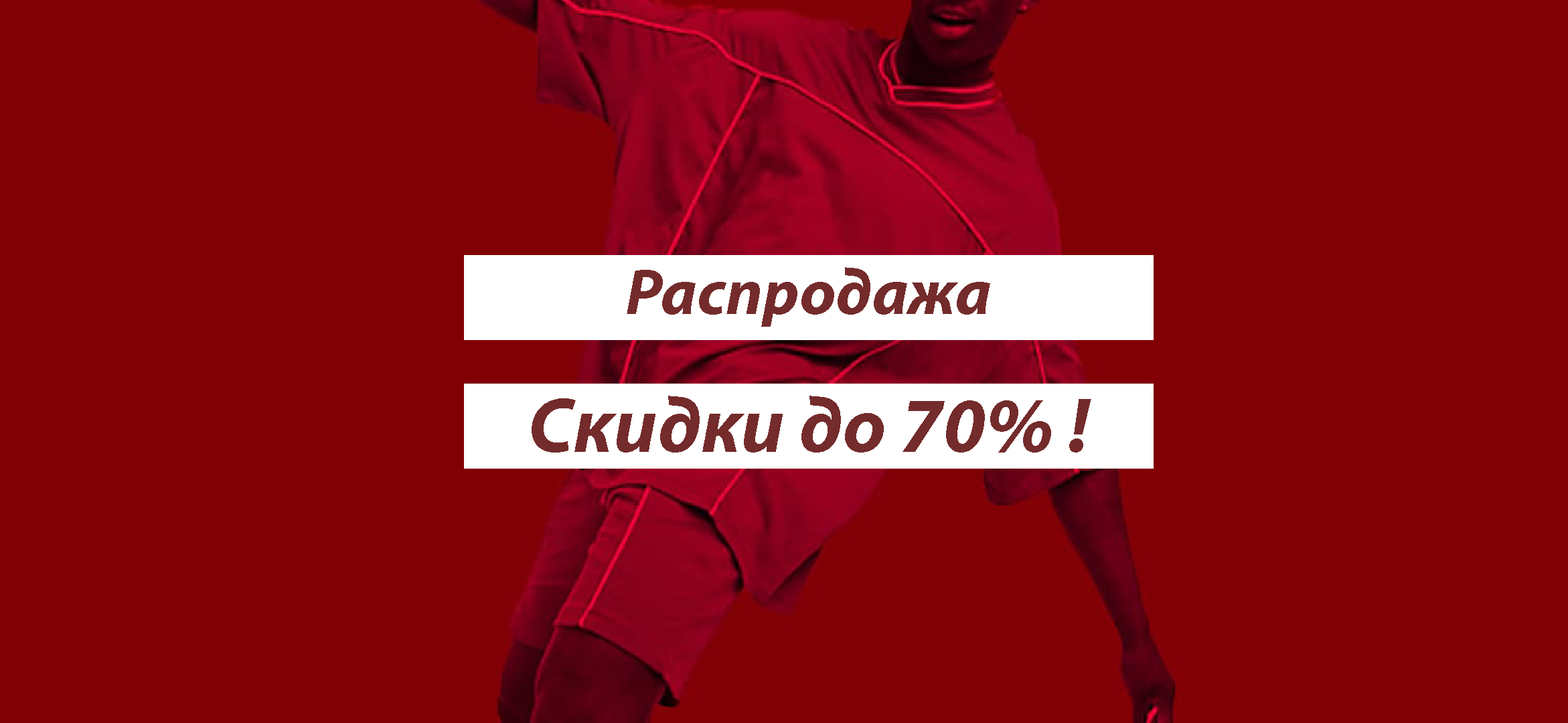
<style>
.page{position:relative;width:1568px;height:723px;background:#810005}
.page>*{position:absolute;margin:0}
.t1{font:65.3px "MyriadPro-BoldIt";color:#742b2b}
.t2{font:78.4px "MyriadPro-BoldIt";color:#742b2b}
</style>
<div class="page">
<p class="t1" style="left:627px;top:267px;width:363px;height:60px">Распродажа</p>
<p class="t2" style="left:532px;top:396px;width:559px;height:57px">Скидки до 70% !</p>
</div>
